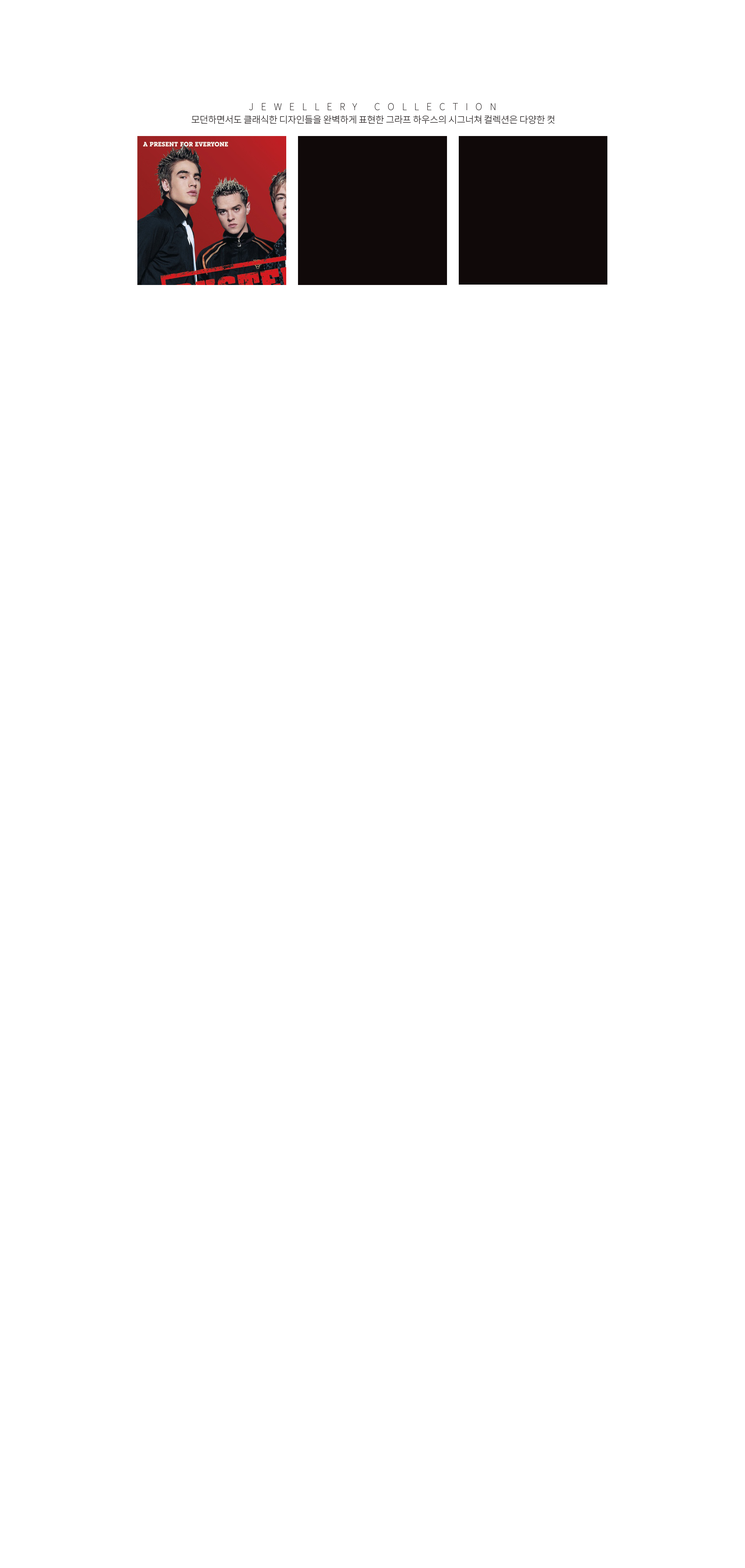
<style>
.page{position:relative;width:745px;height:1568px;background:#ffffff}
.page>*{position:absolute;margin:0}
.t1{font:9.4px "NotoSansKR-Thin";letter-spacing:0.8em;color:#100909}
.t2{font:9.4px "NotoSansKR-Light";letter-spacing:-0.025em;color:#100909}
</style>
<div class="page">
<p class="t1" style="left:249px;top:103px;width:246px;height:8px">JEWELLERY COLLECTION</p>
<p class="t2" style="left:191px;top:115px;width:364px;height:9px">모던하면서도 클래식한 디자인들을 완벽하게 표현한 그라프 하우스의 시그너쳐 컬렉션은 다양한 컷</p>
</div>
